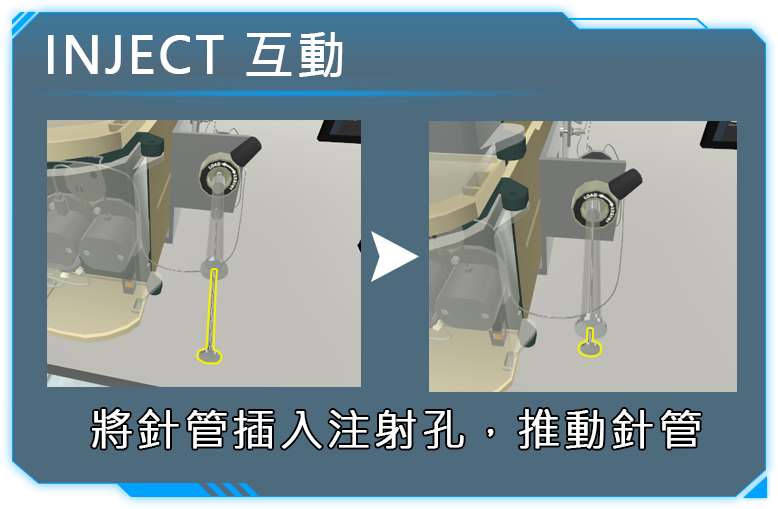
<style>
.page{position:relative;width:778px;height:509px;background:#4e6b7e}
.page>*{position:absolute;margin:0}
.t1{font:49.5px "MicrosoftJhengHeiRegular";letter-spacing:0.05em;color:#fefefe;font-weight:bold}
.t2{font:44px "MicrosoftJhengHeiRegular";letter-spacing:0.05em;color:#fefefe;font-weight:bold}
</style>
<div class="page">
<p class="t1" style="left:48px;top:32px;width:295px;height:45px">INJECT 互動</p>
<p class="t2" style="left:92px;top:409px;width:609px;height:40px">將針管插入注射孔，推動針管</p>
</div>
